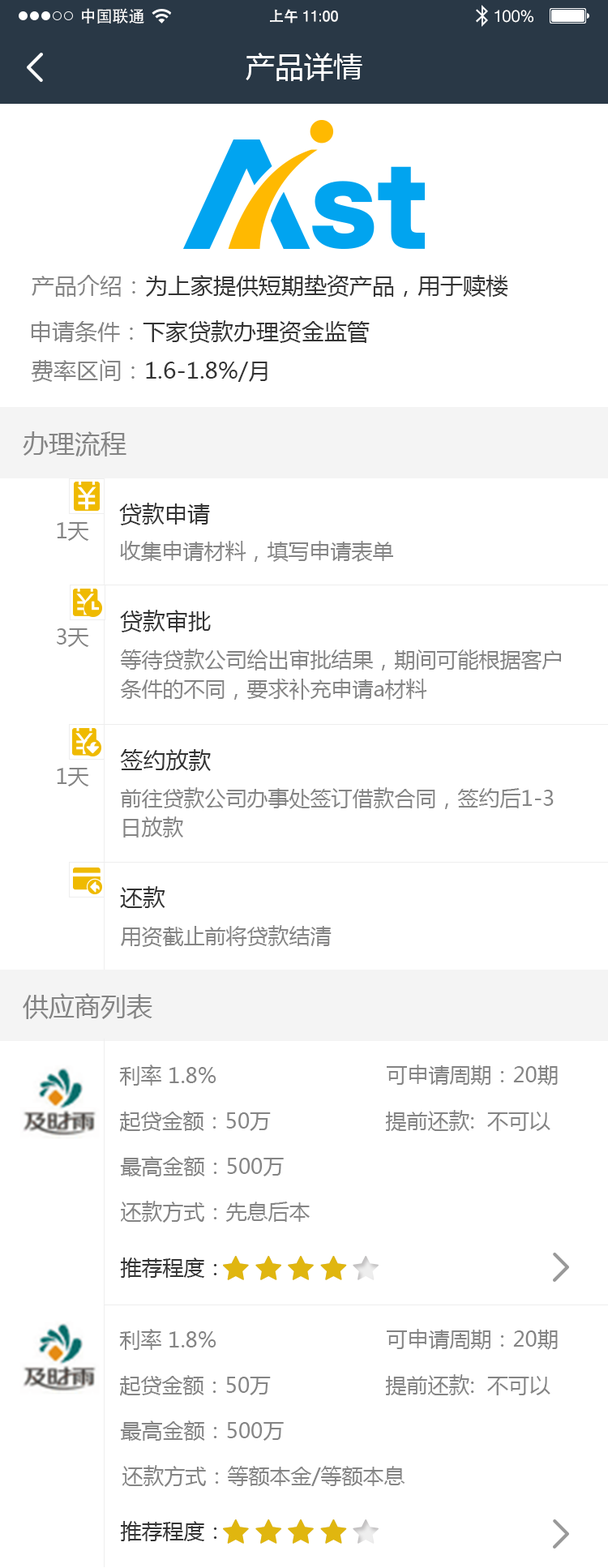
<style>
.page{position:relative;width:608px;height:1568px;background:#ffffff}
.page>*{position:absolute;margin:0}
.t1{font:16.2px "STHeiti";color:#ffffff}
.t2{font:14.6px "MicrosoftSansSerif";color:#ffffff}
.t3{font:14.6px "STHeiti";color:#ffffff}
.t4{font:16.2px "MicrosoftSansSerif";color:#ffffff}
.t5{font:29.2px "MicrosoftYaHei";color:#ffffff}
.t6{font:22.7px "MicrosoftYaHei";color:#333333}
.t7{font:22.7px "MicrosoftYaHei";color:#848484}
.t8{font:25.9px "MicrosoftYaHei";color:#848484}
.t9{font:21.1px "MicrosoftYaHei";color:#848484}
.t10{font:21.1px/29.2px "MicrosoftYaHei";color:#848484}
.t11{font:21.1px "MicrosoftYaHei";color:#333333}
</style>
<div class="page">
<p class="t1" style="left:82px;top:8px;width:62px;height:16px">中国联通</p>
<p class="t2" style="left:270px;top:9px;width:68px;height:15px"><span class="t3">上午 </span>11:00</p>
<p class="t4" style="left:495px;top:10px;width:38px;height:13px">100%</p>
<p class="t5" style="left:246px;top:53px;width:116px;height:28px">产品详情</p>
<p class="t6" style="left:32px;top:275px;width:476px;height:22px"><span class="t7">产品介绍：</span>为上家提供短期垫资产品，用于赎楼</p>
<p class="t6" style="left:31px;top:320px;width:339px;height:23px"><span class="t7"><br>申请条件：</span>下家贷款办理资金监管</p>
<p class="t6" style="left:31px;top:359px;width:237px;height:23px"><span class="t7">费率区间：</span>1.6-1.8%/月</p>
<p class="t8" style="left:23px;top:431px;width:103px;height:25px">办理流程</p>
<p class="t6" style="left:119px;top:503px;width:91px;height:22px">贷款申请</p>
<p class="t9" style="left:57px;top:522px;width:32px;height:19px">1天</p>
<p class="t9" style="left:120px;top:541px;width:273px;height:21px">收集申请材料，填写申请表单</p>
<p class="t6" style="left:120px;top:610px;width:91px;height:22px">贷款审批</p>
<p class="t9" style="left:57px;top:628px;width:32px;height:19px">3天</p>
<p class="t10" style="left:120px;top:649px;width:441px;height:51px">等待贷款公司给出审批结果，期间可能根据客户<br>条件的不同，要求补充申请a材料</p>
<p class="t6" style="left:120px;top:749px;width:91px;height:22px">签约放款</p>
<p class="t9" style="left:57px;top:768px;width:32px;height:18px">1天</p>
<p class="t10" style="left:121px;top:787px;width:433px;height:51px">前往贷款公司办事处签订借款合同，签约后1-3<br>日放款</p>
<p class="t6" style="left:120px;top:886px;width:45px;height:22px">还款</p>
<p class="t9" style="left:121px;top:925px;width:211px;height:22px">用资截止前将贷款结清</p>
<p class="t8" style="left:23px;top:993px;width:129px;height:26px">供应商列表</p>
<p class="t9" style="left:119px;top:1065px;width:97px;height:21px">利率 1.8%</p>
<p class="t9" style="left:387px;top:1065px;width:171px;height:21px">可申请周期：20期</p>
<p class="t9" style="left:385px;top:1110px;width:166px;height:21px">提前还款:  不可以</p>
<p class="t9" style="left:120px;top:1111px;width:151px;height:21px">起贷金额：50万</p>
<p class="t9" style="left:120px;top:1156px;width:164px;height:20px">最高金额：500万</p>
<p class="t9" style="left:121px;top:1201px;width:189px;height:22px">还款方式：先息后本</p>
<p class="t11" style="left:120px;top:1257px;width:97px;height:21px">推荐程度：</p>
<p class="t9" style="left:119px;top:1329px;width:97px;height:21px">利率 1.8%</p>
<p class="t9" style="left:387px;top:1329px;width:171px;height:21px">可申请周期：20期</p>
<p class="t9" style="left:120px;top:1375px;width:151px;height:21px">起贷金额：50万</p>
<p class="t9" style="left:385px;top:1374px;width:166px;height:21px">提前还款:  不可以</p>
<p class="t9" style="left:120px;top:1420px;width:164px;height:21px">最高金额：500万</p>
<p class="t9" style="left:122px;top:1465px;width:283px;height:22px">还款方式：等额本金/等额本息</p>
<p class="t11" style="left:120px;top:1521px;width:97px;height:20px">推荐程度：</p>
</div>
